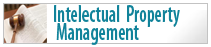
<style>
.page{position:relative;width:211px;height:47px;background:#ffffff}
.page>*{position:absolute;margin:0}
.t1{font:24px/18px "MyriadPro-SemiboldCond";color:#11839a;scale:0.78 1}
</style>
<div class="page">
<p class="t1" style="left:54px;top:5px;width:126px;height:40px">Intelectual  Property<br> Management</p>
</div>
